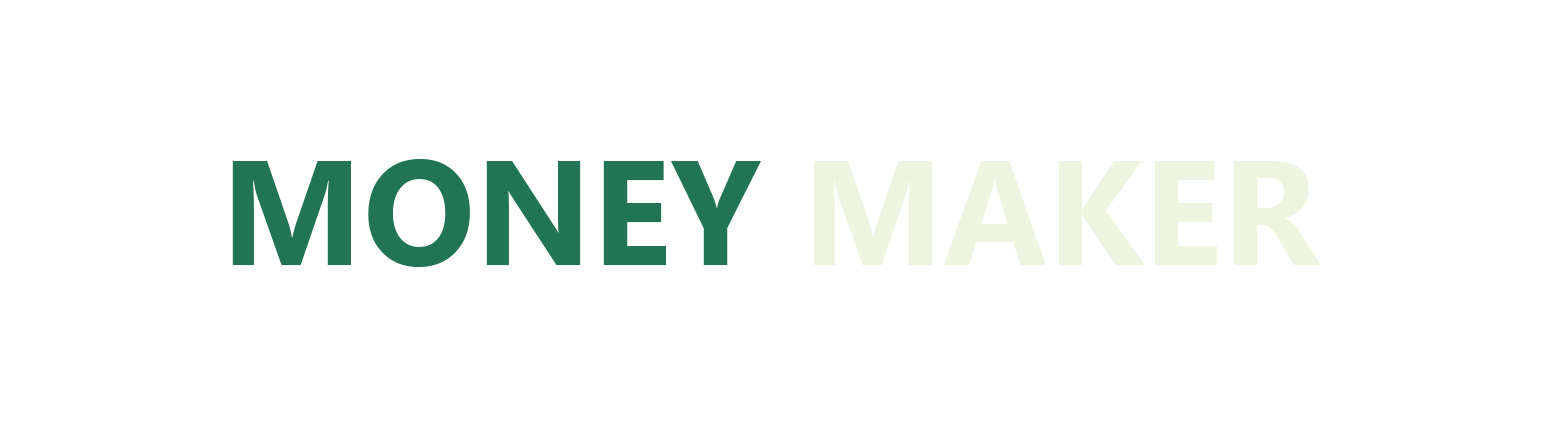
<style>
.page{position:relative;width:1546px;height:423px;background:#ffffff}
.page>*{position:absolute;margin:0}
.t1{font:148px "SegoeUI-Bold";color:#217554}
.t2{font:148px "SegoeUI-Bold";color:#edf5e1}
</style>
<div class="page">
<p class="t1" style="left:232px;top:159px;width:1089px;height:108px">MONEY <span class="t2">MAKER</span></p>
</div>
